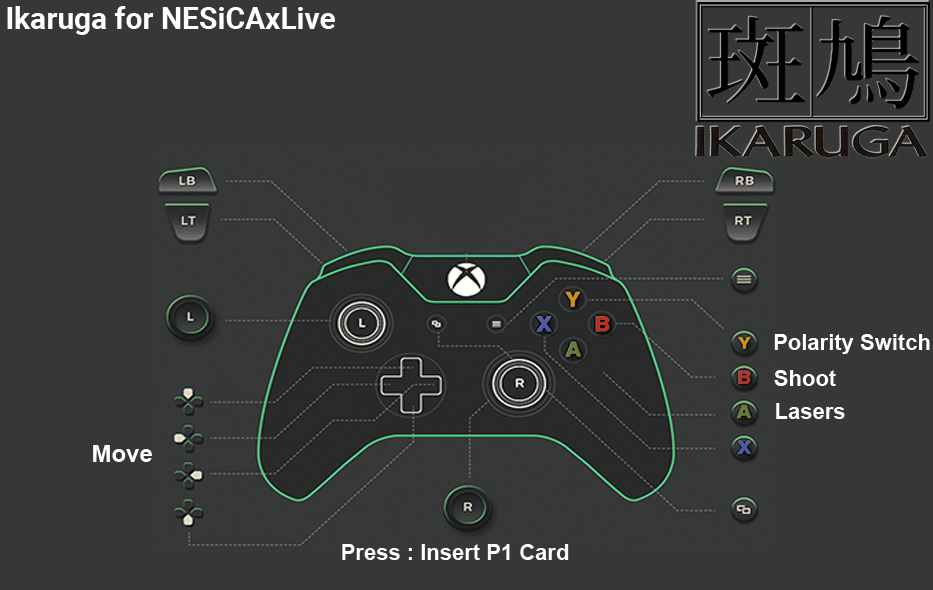
<style>
.page{position:relative;width:933px;height:590px;background:#363838}
.page>*{position:absolute;margin:0}
.t1{font:30px "Roboto-Bold";color:#ffffff}
.t2{font:22px "Arial-BoldMT";color:#fefefe}
.t3{font:24px "Arial-BoldMT";color:#fefefe}
</style>
<div class="page">
<p class="t1" style="left:7px;top:6px;width:328px;height:29px">Ikaruga for NESiCAxLive</p>
<p class="t2" style="left:774px;top:334px;width:156px;height:20px">Polarity Switch</p>
<p class="t2" style="left:774px;top:370px;width:62px;height:16px">Shoot</p>
<p class="t2" style="left:776px;top:403px;width:69px;height:16px">Lasers</p>
<p class="t3" style="left:93px;top:445px;width:59px;height:17px">Move</p>
<p class="t2" style="left:342px;top:544px;width:227px;height:16px">Press : Insert P1 Card</p>
</div>
